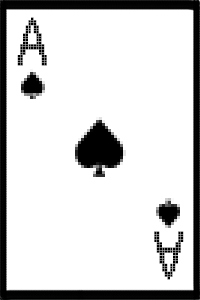
<style>
.page{position:relative;width:200px;height:300px;background:#ffffff}
.page>*{position:absolute;margin:0}
.t1{font:64.2px "FZXS24--GB1-0";color:#000000}
</style>
<div class="page">
<p class="t1" style="left:17px;top:17px;width:30px;height:49px">A</p>
<p class="t1" style="left:154px;top:231px;width:30px;height:49px;rotate:180deg">A</p>
</div>
